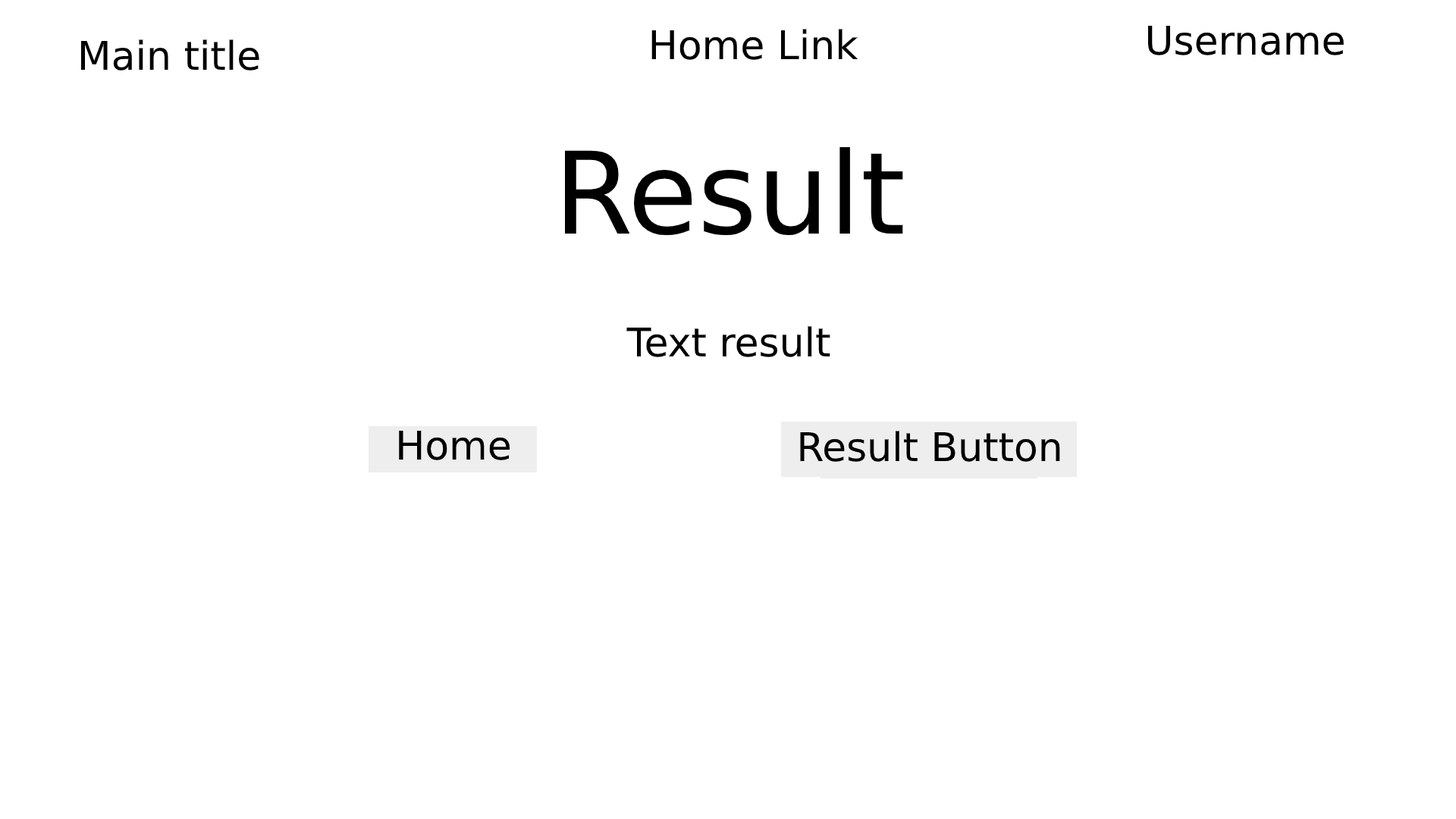
<style>
.page{position:relative;width:1456px;height:819px;background:#ffffff}
.page>*{position:absolute;margin:0}
.t1{font:39.4px "DejaVuSans";color:#000000}
.t2{font:113.7px "DejaVuSans";color:#000000}
</style>
<div class="page">
<p class="t1" style="left:651px;top:29px;width:207px;height:31px">Home Link</p>
<p class="t1" style="left:1147px;top:26px;width:197px;height:29px">Username</p>
<p class="t1" style="left:80px;top:39px;width:179px;height:32px">Main title</p>
<p class="t2" style="left:564px;top:147px;width:339px;height:89px">Result</p>
<p class="t1" style="left:626px;top:326px;width:204px;height:31px">Text result</p>
<p class="t1" style="left:399px;top:431px;width:111px;height:29px">Home</p>
<p class="t1" style="left:800px;top:431px;width:260px;height:31px">Result Button</p>
</div>
